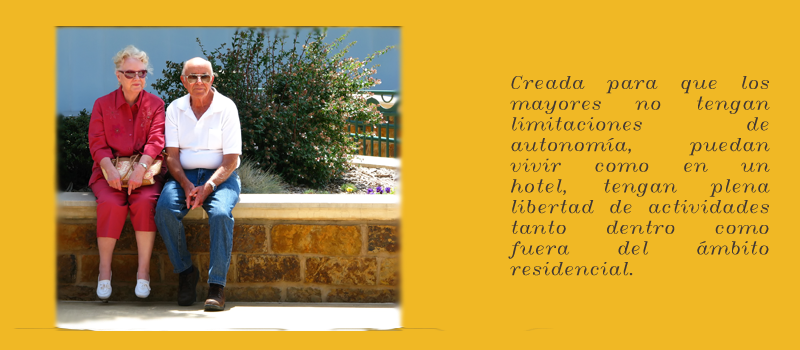
<style>
.page{position:relative;width:800px;height:350px;background:#f0b825}
.page>*{position:absolute;margin:0}
.t1{font:17.2px "ItalicT";color:#423834}
</style>
<div class="page">
<p class="t1" style="left:508px;top:75px;width:262px;height:201px;text-align:justify">Creada para que los mayores no tengan  limitaciones de      autonomía, puedan vivir como en un hotel, tengan plena  libertad de actividades tanto dentro como fuera del ámbito    residencial.</p>
</div>
